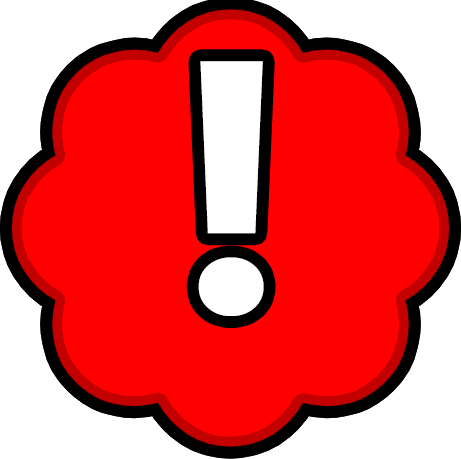
<style>
.page{position:relative;width:461px;height:459px;background:#ff0000}
.page>*{position:absolute;margin:0}
.t1{font:354.1px "Roboto-Black";color:#ffffff}
</style>
<div class="page">
<p class="t1" style="left:198px;top:61px;width:66px;height:255px">!</p>
</div>
